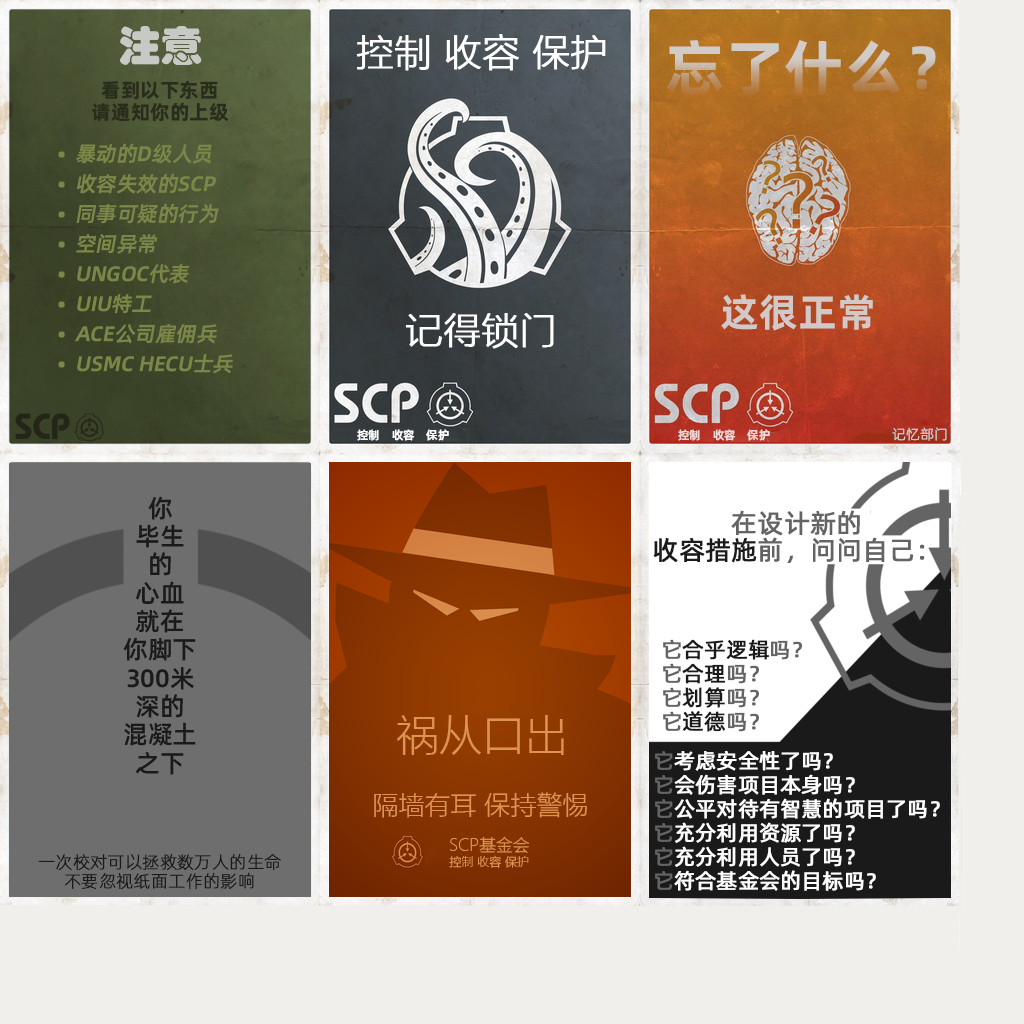
<style>
.page{position:relative;width:1024px;height:1024px}
.page>*{position:absolute;margin:0}
.t1{font:42px "STHupo";color:#c7c9c4}
.t2{font:37px "MicrosoftYaHeiUILight";color:#ffffff;font-weight:bold}
.t3{font:60.6px "AlibabaPuHuiTiB"}
.t4{font:19.9px/22.7px "AlibabaPuHuiTiB";color:#292d1c}
.t5{font:20.9px/30px "AlibabaPuHuiTiM";color:#7a8748;font-style:italic}
.t6{font:39.6px "AlibabaPuHuiTiB";color:#d4d4d4}
.t7{font:11.6px "AlibabaPuHuiTiM";color:#ffffff}
.t8{font:11.6px "AlibabaPuHuiTiM";color:#eed8d7}
.t9{font:14px "AlibabaPuHuiTiL";color:#cccccc;font-weight:bold}
.t10{font:25.1px/28.3px "AlibabaPuHuiTiM";color:#1a1a1a}
.t11{font:26px/27px "AlibabaPuHuiTiR";color:#646464;font-weight:bold}
.t12{font:26px/27px "AlibabaPuHuiTiR";color:#1a1a1a;font-weight:bold}
.t13{font:21.5px/24px "AlibabaPuHuiTiR";color:#1a1a1a;font-weight:bold}
.t14{font:21.5px/24px "AlibabaPuHuiTiR";color:#646464;font-weight:bold}
.t15{font:43px "MicrosoftYaHeiUILight";color:#de934f}
.t16{font:21px/24px "AlibabaPuHuiTiR";color:#ffffff;font-weight:bold}
.t17{font:21px/24px "AlibabaPuHuiTiR";color:#646464;font-weight:bold}
.t18{font:26px "MicrosoftYaHeiUILight";color:#de934f}
.t19{font:12.1px/19px "MicrosoftYaHeiUILight";color:#de934f}
.t20{font:16.8px/19px "MicrosoftYaHeiUILight";color:#de934f}
.t21{font:17.2px/19.4px "AlibabaPuHuiTiL";color:#1a1a1a;font-weight:bold}
</style>
<div class="page">
<p class="t1" style="left:120px;top:26px;width:82px;height:39px">注意</p>
<p class="t2" style="left:356px;top:34px;width:250px;height:37px">控制 收容 保护</p>
<p class="t3" style="left:666px;top:40px;width:270px;height:55px">忘了什么？</p>
<p class="t4" style="left:92px;top:80px;width:137px;height:42px;text-align:center">看到以下东西<br>请通知你的上级</p>
<p class="t5" style="left:58px;top:143px;width:175px;height:231px">暴动的D级人员<br>收容失效的SCP<br>同事可疑的行为<br>空间异常<br>UNGOC代表<br>UIU特工<br>ACE公司雇佣兵<br>USMC HECU士兵</p>
<p class="t6" style="left:721px;top:294px;width:152px;height:37px;opacity:0.9">这很正常</p>
<p class="t2" style="left:405px;top:313px;width:149px;height:36px">记得锁门</p>
<p class="t7" style="left:357px;top:429px;width:92px;height:12px">控制    收容    保护</p>
<p class="t8" style="left:678px;top:429px;width:92px;height:12px">控制    收容    保护</p>
<p class="t9" style="left:892px;top:427px;width:55px;height:14px">记忆部门</p>
<p class="t10" style="left:123px;top:496px;width:73px;height:279px;text-align:center">你<br>毕生<br>的<br>心血<br>就在<br>你脚下<br>300米<br>深的<br>混凝土<br>之下</p>
<p class="t11" style="left:653px;top:510px;width:272px;height:53px;text-align:center">在设计新的<br><span class="t12">收容措施</span>前，问问自己：</p>
<p class="t13" style="left:663px;top:639px;width:139px;height:93px"><span class="t14">它</span>合乎逻辑<span class="t14">吗？<br>它</span>合理<span class="t14">吗？<br>它</span>划算<span class="t14">吗？<br>它</span>道德<span class="t14">吗？</span></p>
<p class="t15" style="left:397px;top:715px;width:167px;height:40px">祸从口出</p>
<p class="t16" style="left:655px;top:750px;width:285px;height:141px"><span class="t17">它</span>考虑安全性了吗？<br><span class="t17">它</span>会伤害项目本身吗？<br><span class="t17">它</span>公平对待有智慧的项目了吗？<br><span class="t17">它</span>充分利用资源了吗？<br><span class="t17">它</span>充分利用人员了吗？<br><span class="t17">它</span>符合基金会的目标吗？</p>
<p class="t18" style="left:374px;top:792px;width:213px;height:26px">隔墙有耳 保持警惕</p>
<p class="t19" style="left:449px;top:836px;width:80px;height:32px;text-align:center"><span class="t20">SCP基金会<br></span>控制 收容 保护</p>
<p class="t21" style="left:38px;top:854px;width:243px;height:36px;text-align:center">一次校对可以拯救数万人的生命<br>不要忽视纸面工作的影响</p>
</div>
